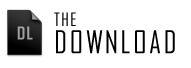
<style>
.page{position:relative;width:191px;height:68px;background:#ffffff}
.page>*{position:absolute;margin:0}
.t1{font:30.4px/17px "AgencyFB-Reg";letter-spacing:0.08em;color:#000000}
.t2{font:30.4px/17px "AgencyFB-Reg";letter-spacing:0.06em;color:#000000}
.t3{font:16.9px "AgencyFB-Bold";letter-spacing:0.08em;color:#a1a1a1}
</style>
<div class="page">
<p class="t1" style="left:54px;top:12px;width:121px;height:42px"><span class="t2">THE <br></span>DOWNLOAD</p>
<p class="t3" style="left:17px;top:26px;width:16px;height:14px">DL</p>
</div>
